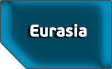
<style>
.page{position:relative;width:112px;height:69px;background:#00485f}
.page>*{position:absolute;margin:0}
.t1{font:16.6px "PFBeauSansPro-Bold";color:#ffffff;scale:0.96 1}
</style>
<div class="page">
<p class="t1" style="left:30px;top:24px;width:57px;height:13px">Eurasia</p>
</div>
